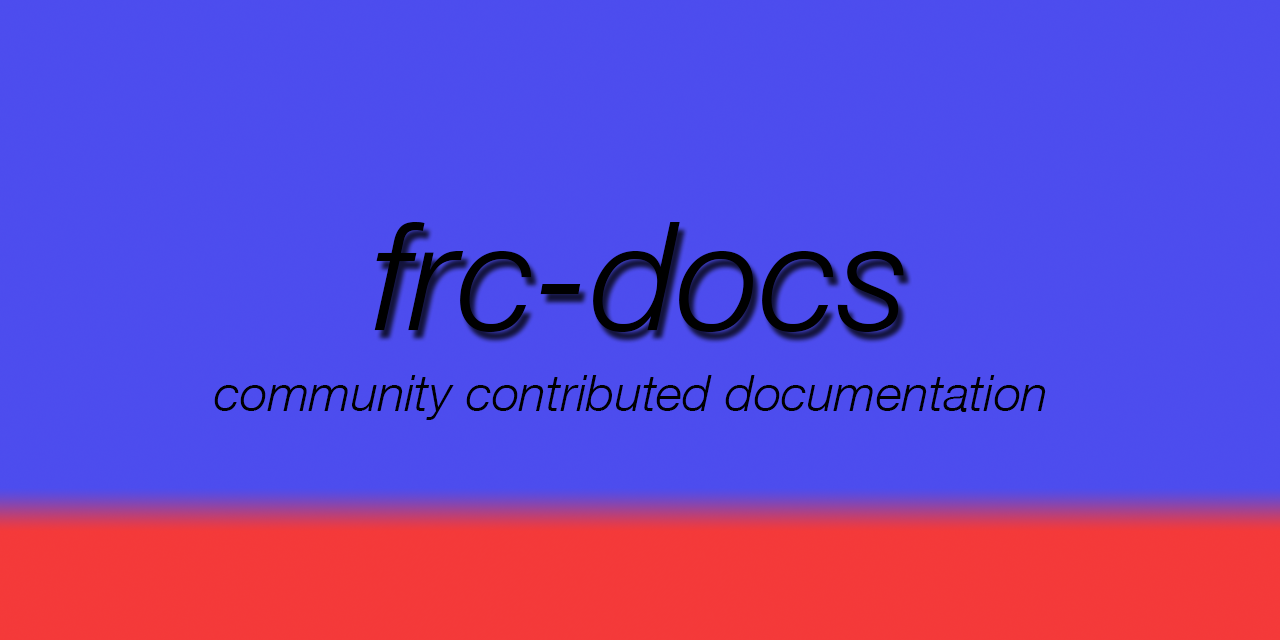
<style>
.page{position:relative;width:1280px;height:640px}
.page>*{position:absolute;margin:0}
.t1{font:150px "HelveticaNeue-Italic";color:#000000}
.t2{font:50px "HelveticaNeue-Italic";color:#000000}
</style>
<div class="page">
<p class="t1" style="left:374px;top:222px;width:530px;height:110px">frc-docs</p>
<p class="t2" style="left:214px;top:375px;width:832px;height:45px">community contributed documentation</p>
</div>
